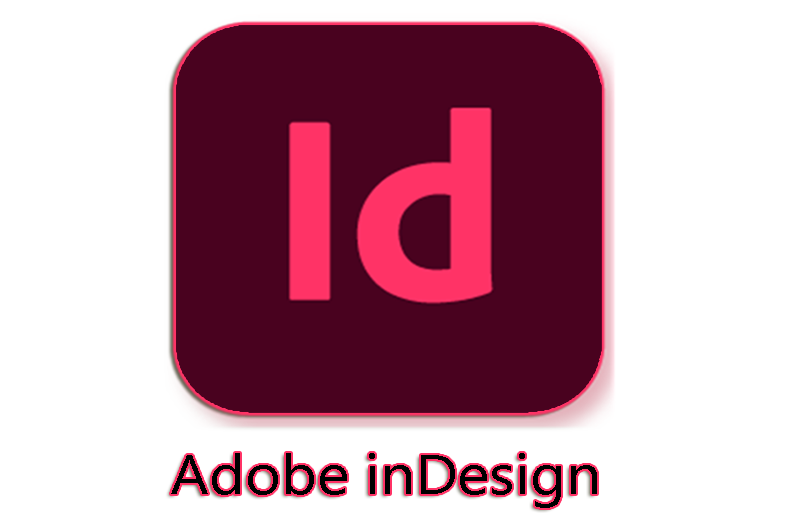
<style>
.page{position:relative;width:802px;height:522px;background:#ffffff}
.page>*{position:absolute;margin:0}
.t1{font:56px "SegoeUI";color:#000000;scale:1.09 1}
</style>
<div class="page">
<p class="t1" style="left:171px;top:453px;width:426px;height:55px">Adobe inDesign</p>
</div>
